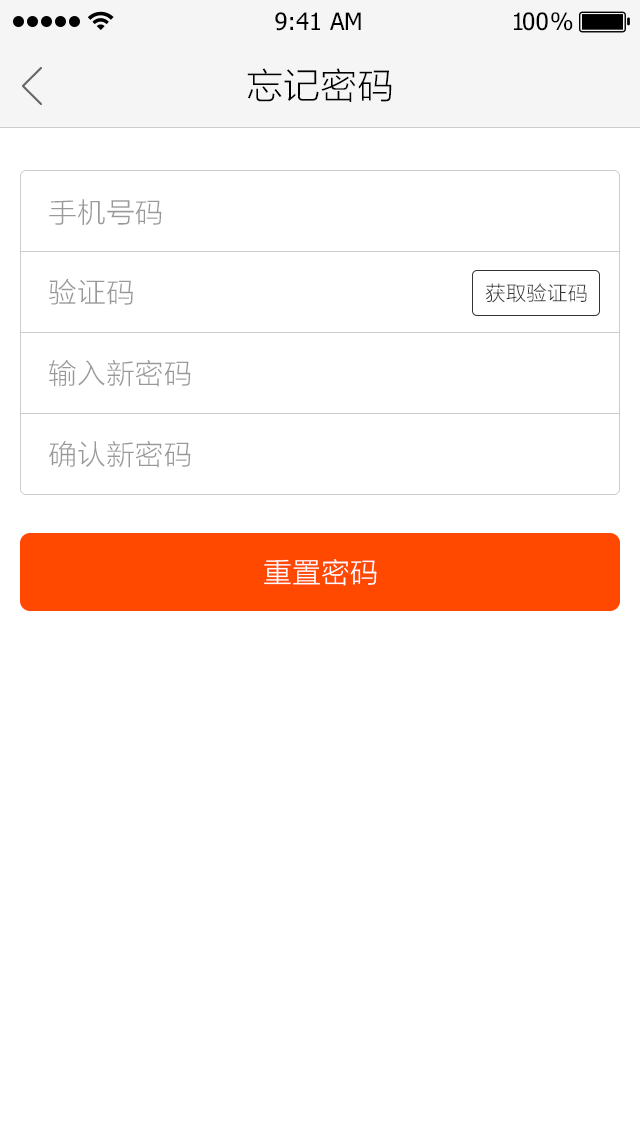
<style>
.page{position:relative;width:640px;height:1136px;background:#ffffff}
.page>*{position:absolute;margin:0}
.t1{font:24px "Tahoma";color:#000000}
.t2{font:24px "Tahoma";letter-spacing:-0.1em;color:#000000}
.t3{font:24px "Tahoma";letter-spacing:-0.25em;color:#000000}
.t4{font:36px "STHeitiSC-Light";color:#000000}
.t5{font:28px "STHeitiSC-Light";color:#999999}
.t6{font:20px "STHeitiSC-Light";color:#333333}
.t7{font:28px "STHeitiSC-Light";color:#ffffff}
</style>
<div class="page">
<p class="t1" style="left:275px;top:12px;width:86px;height:19px">9:41 AM</p>
<p class="t2" style="left:514px;top:12px;width:59px;height:19px">1<span class="t1">0</span><span class="t3">0 </span>%</p>
<p class="t4" style="left:247px;top:68px;width:145px;height:34px">忘记密码</p>
<p class="t5" style="left:49px;top:199px;width:113px;height:26px">手机号码</p>
<p class="t5" style="left:49px;top:278px;width:84px;height:27px">验证码</p>
<p class="t6" style="left:485px;top:283px;width:102px;height:20px">获取验证码</p>
<p class="t5" style="left:49px;top:360px;width:142px;height:27px">输入新密码</p>
<p class="t5" style="left:49px;top:441px;width:142px;height:27px">确认新密码</p>
<p class="t7" style="left:264px;top:559px;width:113px;height:27px">重置密码</p>
</div>
